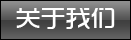
<style>
.page{position:relative;width:131px;height:40px}
.page>*{position:absolute;margin:0}
.t1{font:25px "TRENDS";color:#ffffff}
</style>
<div class="page">
<p class="t1" style="left:16px;top:8px;width:99px;height:21px">关于我们</p>
</div>
